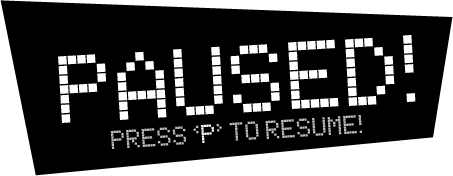
<style>
.page{position:relative;width:453px;height:176px;background:#000000}
.page>*{position:absolute;margin:0}
.t1{font:66.6px "CallOne-Regular";color:#ffffff}
.t2{font:18px "CallOne-Regular";color:#bfbfbf}
.t3{font:18px "CallOne-Regular";color:#ffffff}
</style>
<div class="page">
<p class="t1" style="left:58px;top:35px;width:358px;height:88px;rotate:-3deg">PAUSED!</p>
<p class="t2" style="left:110px;top:115px;width:252px;height:34px;rotate:-4deg">PRESS ‘<span class="t3">P</span>’ TO RESUME!</p>
</div>
